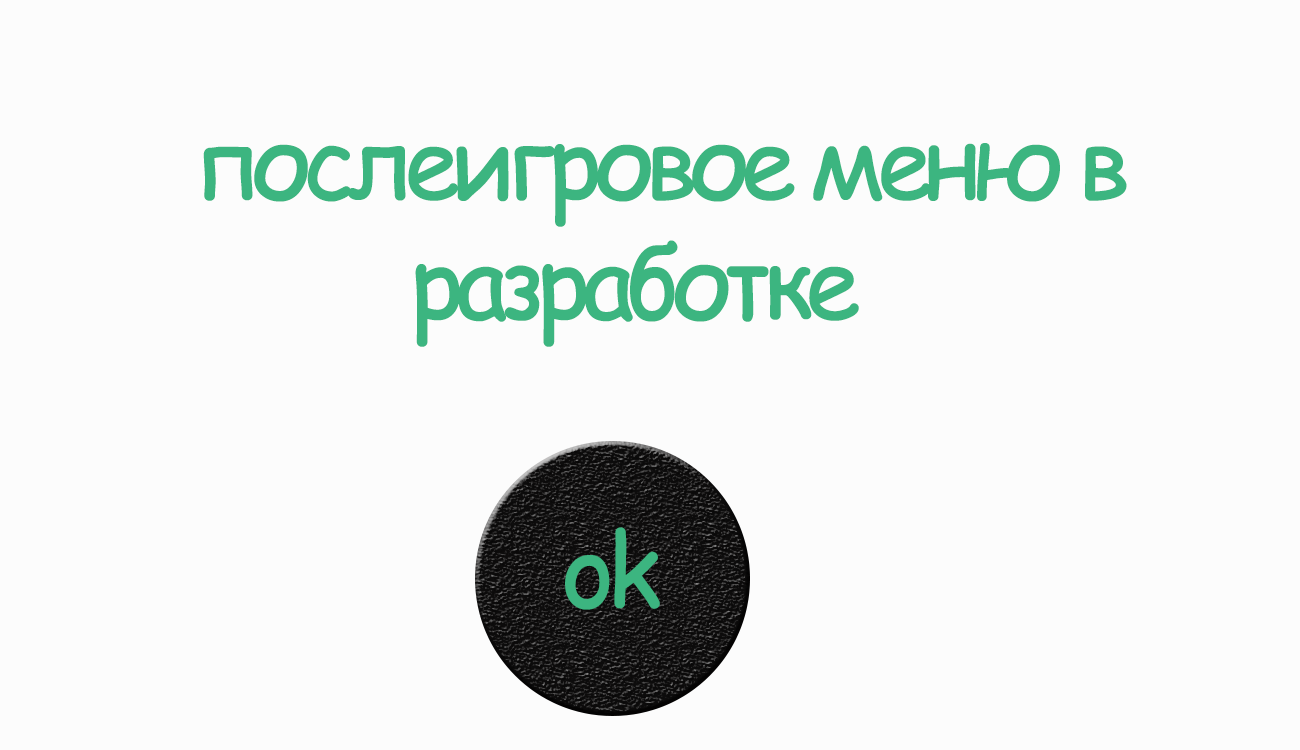
<style>
.page{position:relative;width:1300px;height:750px;background:#fcfcfc}
.page>*{position:absolute;margin:0}
.t1{font:100px "ComicSansMS";letter-spacing:-0.1em;color:#3cb580;font-weight:bold}
</style>
<div class="page">
<p class="t1" style="left:203px;top:143px;width:924px;height:204px">послеигровое меню в                    разработке</p>
<p class="t1" style="left:565px;top:527px;width:95px;height:83px">ok</p>
</div>
